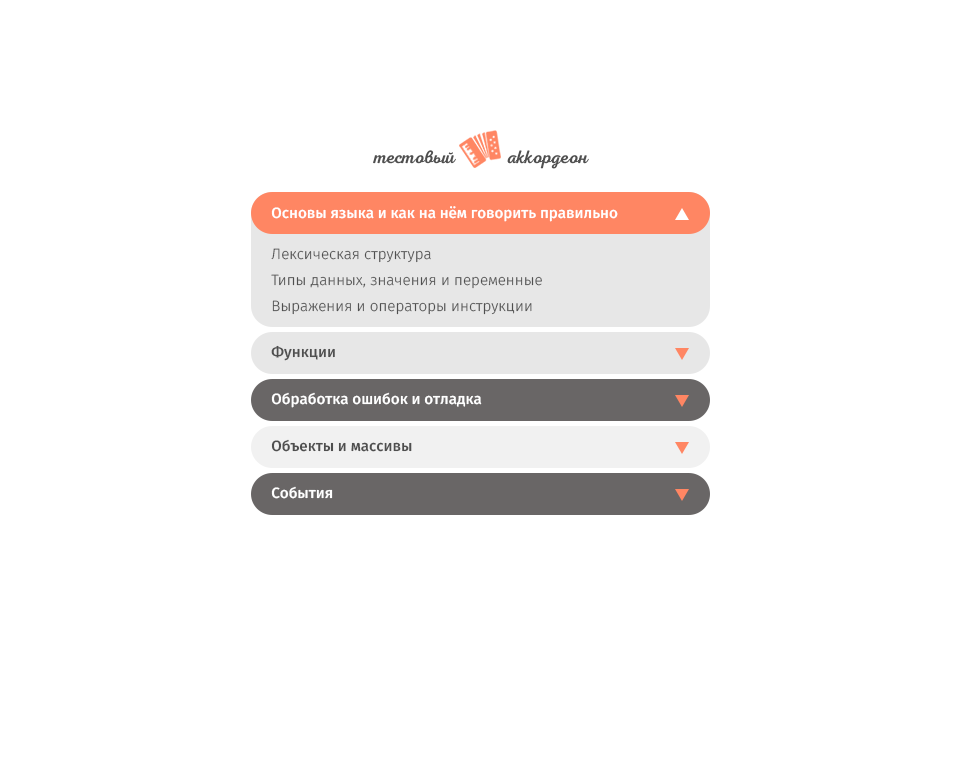
<style>
.page{position:relative;width:960px;height:768px;background:#ffffff}
.page>*{position:absolute;margin:0}
.t1{font:15px "FiraSans-Medium";color:#ffffff}
.t2{font:15px/26px "FiraSans-Light";color:#4f4f4f}
.t3{font:15px "FiraSans-Medium";color:#4f4f4f}
</style>
<div class="page">
<p class="t1" style="left:271px;top:206px;width:347px;height:16px">Основы языка и как на нём говорить правильно</p>
<p class="t2" style="left:271px;top:248px;width:271px;height:67px">Лексическая структура<br>Типы данных, значения и переменные<br>Выражения и операторы инструкции</p>
<p class="t3" style="left:271px;top:345px;width:64px;height:16px">Функции</p>
<p class="t1" style="left:271px;top:392px;width:211px;height:16px">Обработка ошибок и отладка</p>
<p class="t3" style="left:271px;top:439px;width:141px;height:13px">Объекты и массивы</p>
<p class="t1" style="left:271px;top:486px;width:62px;height:13px">События</p>
</div>
